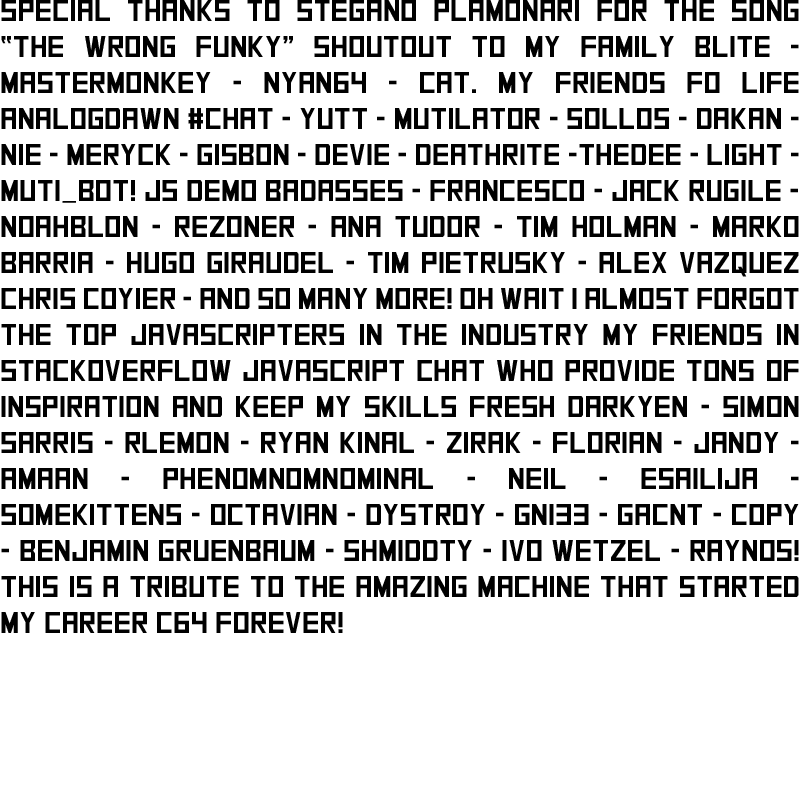
<style>
.page{position:relative;width:800px;height:800px;background:#ffffff}
.page>*{position:absolute;margin:0}
.t1{font:30px "SquareFont";color:#000000}
</style>
<div class="page">
<p class="t1" style="left:1px;top:0px;width:798px;height:633px;text-align:justify">Special thanks to Stegano plamonari for The song “The Wrong Funky” shoutout to my family Blite - mastermonkey - nyan64 - Cat. my friends fo life analogdawn #chat - yutt - mutilator - sollos - dakan -  nie - meryck - gisbon - devie - deathrite -thedee - light - muti_bot! Js demo badasses - Francesco - jack rugile - noahblon - rezoner - ana tudor - tim holman - marko barria - hugo giraudel - tim pietrusky - Alex Vazquez chris coyier - and so many more! Oh wait I almost forgot the top javascripters in the industry my friends in Stackoverflow javascript chat who provide tons of inspiration and keep my skills fresh darkyen - simon sarris - rlemon - ryan kinal - zirak - florian - jandy - amaan - phenomnomnominal - neil - esailija - somekittens - octavian - dystroy - gni33 - gacnt - copy - benjamin gruenbaum - shmiddty - ivo wetzel - raynos! This is a tribute to the amazing machine that started my career c64 forever!</p>
</div>
